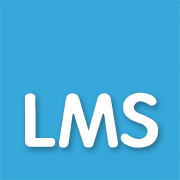
<style>
.page{position:relative;width:180px;height:180px;background:#36a8da}
.page>*{position:absolute;margin:0}
.t1{font:75.2px "STYuanti-SC-Bold";color:#ffffff;scale:1.06 1}
</style>
<div class="page">
<p class="t1" style="left:25px;top:92px;width:133px;height:56px">LMS</p>
</div>
